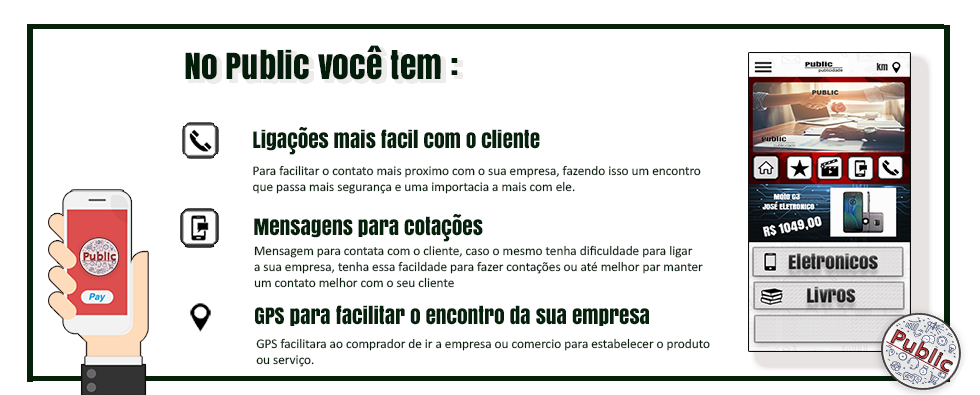
<style>
.page{position:relative;width:980px;height:395px;background:#ffffff}
.page>*{position:absolute;margin:0}
.t1{font:33.7px "Anton";color:#05200b}
.t2{font:21.2px "Anton";color:#05200b}
.t3{font:13.3px "Calibri";color:#05200b}
</style>
<div class="page">
<p class="t1" style="left:185px;top:45px;width:273px;height:35px">No Public você tem :</p>
<p class="t2" style="left:253px;top:126px;width:287px;height:29px">Ligações mais facil com o cliente</p>
<p class="t3" style="left:253px;top:165px;width:448px;height:29px">Para facilitar o contato mais proximo com o sua empresa, fazendo isso um encontro <br>que passa mais segurança e uma importacia a mais com ele.</p>
<p class="t2" style="left:254px;top:213px;width:229px;height:29px">Mensagens para cotações</p>
<p class="t3" style="left:254px;top:245px;width:449px;height:43px">Mensagem para contata com o cliente, caso o mesmo tenha dificuldade para ligar  <br>a sua empresa, tenha essa facildade para fazer contações ou até melhor par manter<br>um contato melhor com o seu cliente</p>
<p class="t2" style="left:255px;top:305px;width:394px;height:21px">GPS para facilitar o encontro da sua empresa</p>
<p class="t3" style="left:256px;top:338px;width:454px;height:29px">GPS facilitara ao comprador de ir a empresa ou comercio para estabelecer o produto <br>ou serviço.</p>
</div>
